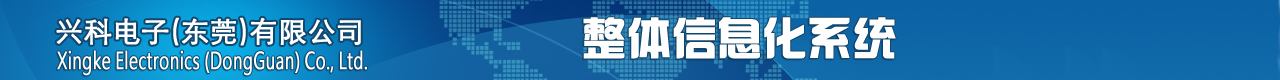
<style>
.page{position:relative;width:1280px;height:80px}
.page>*{position:absolute;margin:0}
.t1{font:28px "STXihei";color:#ffffff;font-weight:bold}
.t2{font:44px "hzgb";color:#fffefe;font-weight:bold}
.t3{font:23px "MicrosoftJhengHeiRegular";color:#ffffff;font-weight:bold;scale:0.69 1}
</style>
<div class="page">
<p class="t1" style="left:56px;top:17px;width:305px;height:29px">兴科电子(东莞)有限公司</p>
<p class="t2" style="left:583px;top:17px;width:313px;height:42px">整体信息化系统</p>
<p class="t3" style="left:57px;top:50px;width:310px;height:26px">Xingke Electronics (DongGuan) Co., Ltd.</p>
</div>
